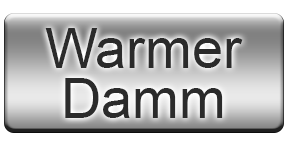
<style>
.page{position:relative;width:288px;height:144px;background:#ffffff}
.page>*{position:absolute;margin:0}
.t1{font:56px/50px "ArialMT";color:#2b2b2b}
</style>
<div class="page">
<p class="t1" style="left:45px;top:28px;width:198px;height:90px;text-align:center">Warmer<br>Damm</p>
</div>
